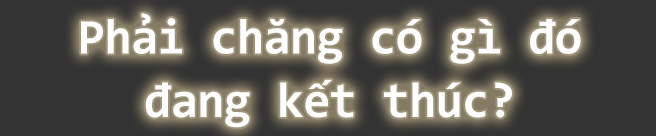
<style>
.page{position:relative;width:656px;height:136px;background:#333333}
.page>*{position:absolute;margin:0}
.t1{font:50px/55.5px "Consolas-Bold";letter-spacing:-0.02em;color:#fefefe}
</style>
<div class="page">
<p class="t1" style="left:81px;top:13px;width:500px;height:115px;text-align:center">Phải chăng có gì đó<br>đang kết thúc?</p>
</div>
